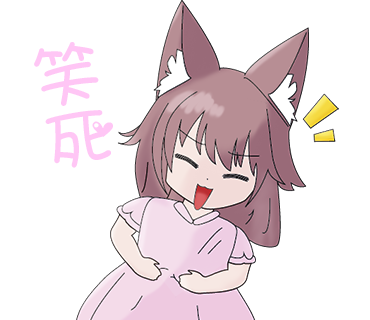
<style>
.page{position:relative;width:370px;height:320px;background:#ffffff}
.page>*{position:absolute;margin:0}
.t1{font:73.6px/64.7px "ARTianniuB5-Bold";letter-spacing:-0.04em;color:#ffc6f5}
</style>
<div class="page">
<p class="t1" style="left:34px;top:42px;width:79px;height:126px;rotate:-11deg">笑<br>死</p>
</div>
